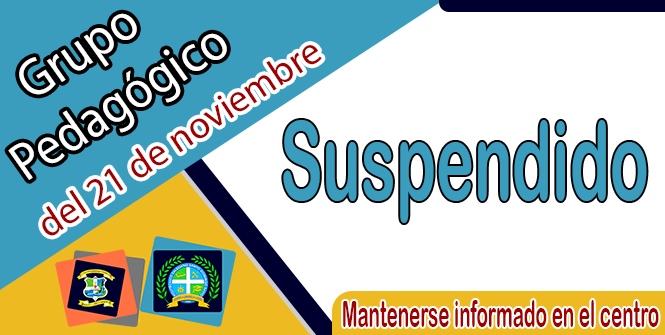
<style>
.page{position:relative;width:665px;height:335px;background:#ffffff}
.page>*{position:absolute;margin:0}
.t1{font:54.2px "MyriadPro-Regular";color:#ffffff;scale:0.91 1}
.t2{font:110.1px "ArialRoundedMTBold";color:#3b9dbe;scale:0.58 1}
.t3{font:37.4px "ArialRoundedMTBold";color:#a10000;scale:0.5 1}
</style>
<div class="page">
<p class="t1" style="left:8px;top:13px;width:219px;height:167px;text-align:center;rotate:-33deg">Grupo <br>Pedagógico</p>
<p class="t2" style="left:283px;top:120px;width:364px;height:103px">Suspendido</p>
<p class="t3" style="left:343px;top:300px;width:316px;height:27px">Mantenerse informado en el centro</p>
</div>
